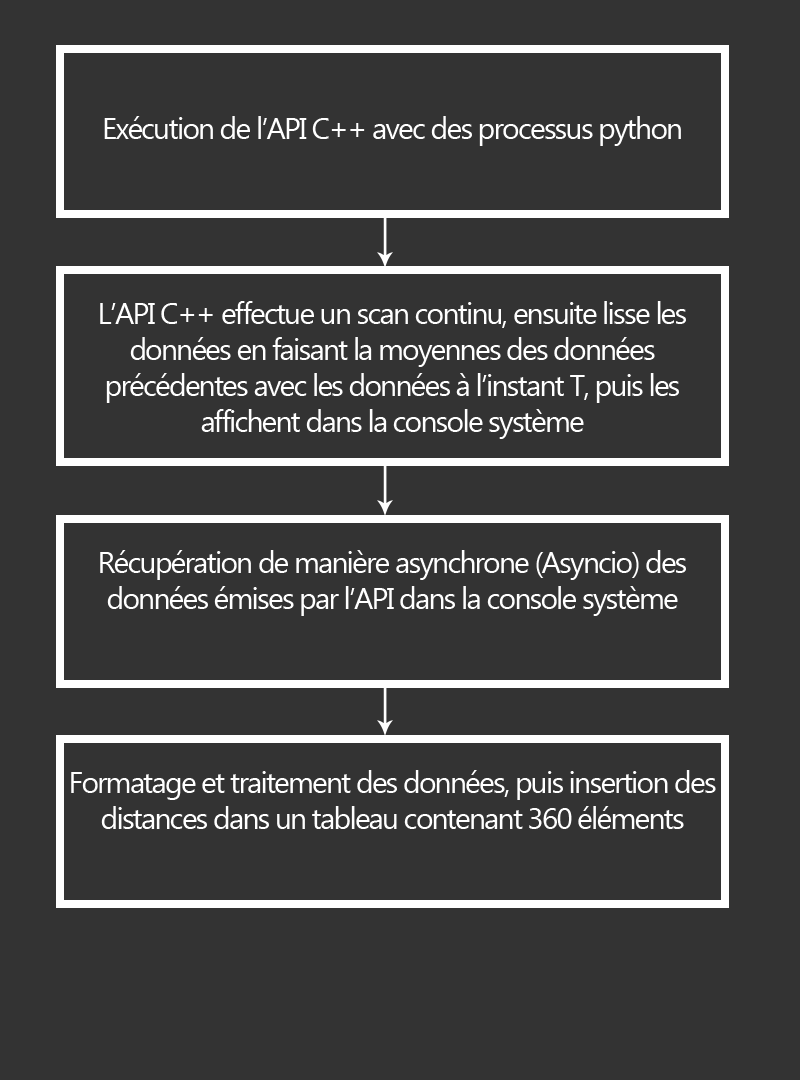
<style>
.page{position:relative;width:800px;height:1080px;background:#333333}
.page>*{position:absolute;margin:0}
.t1{font:30px "Gadugi";letter-spacing:-0.06em;color:#ffffff}
</style>
<div class="page">
<p class="t1" style="left:104px;top:116px;width:577px;height:30px">Exécution de l’API C++ avec des processus python</p>
<p class="t1" style="left:100px;top:301px;width:586px;height:138px;text-align:center">L’API C++ effectue un scan continu, ensuite lisse les données en faisant la moyennes des données précédentes avec les données à l’instant T, puis les affichent dans la console système</p>
<p class="t1" style="left:100px;top:550px;width:586px;height:66px;text-align:center">Récupération de manière asynchrone (Asyncio) des données émises par l’API dans la console système</p>
<p class="t1" style="left:71px;top:770px;width:645px;height:59px;text-align:center">Formatage et traitement des données, puis insertion des distances dans un tableau contenant 360 éléments</p>
</div>
